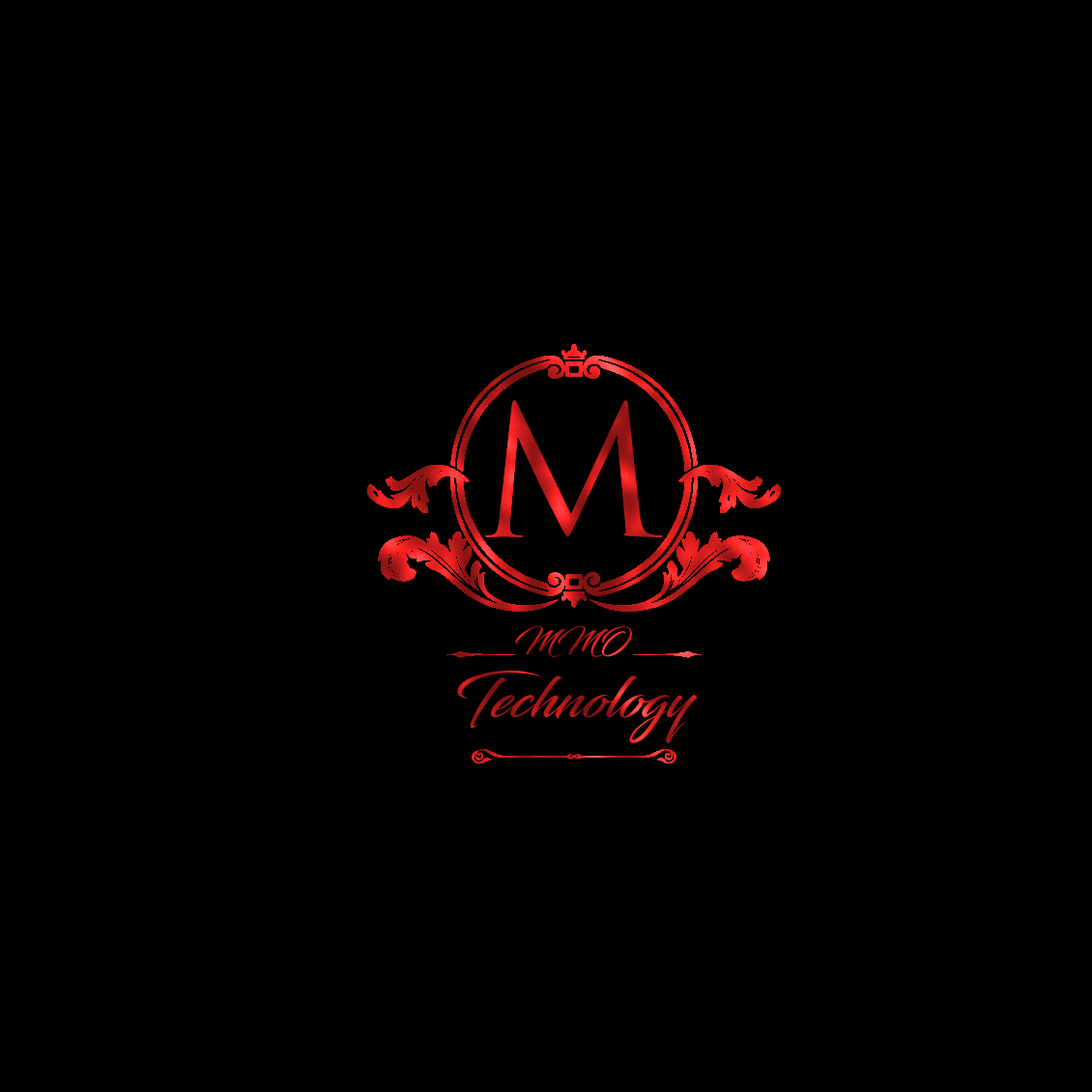
<style>
.page{position:relative;width:1092px;height:1092px;background:#000000}
.page>*{position:absolute;margin:0}
.t1{font:177px "TrajanColor-Concept";letter-spacing:-0.1em}
.t2{font:29px "Blacksword";letter-spacing:0.01em}
.t3{font:56.1px "Blacksword";letter-spacing:0.01em}
</style>
<div class="page">
<p class="t1" style="left:485px;top:400px;width:178px;height:137px">m</p>
<p class="t2" style="left:515px;top:625px;width:117px;height:32px">MMO</p>
<p class="t3" style="left:457px;top:670px;width:241px;height:73px">Technology</p>
</div>
